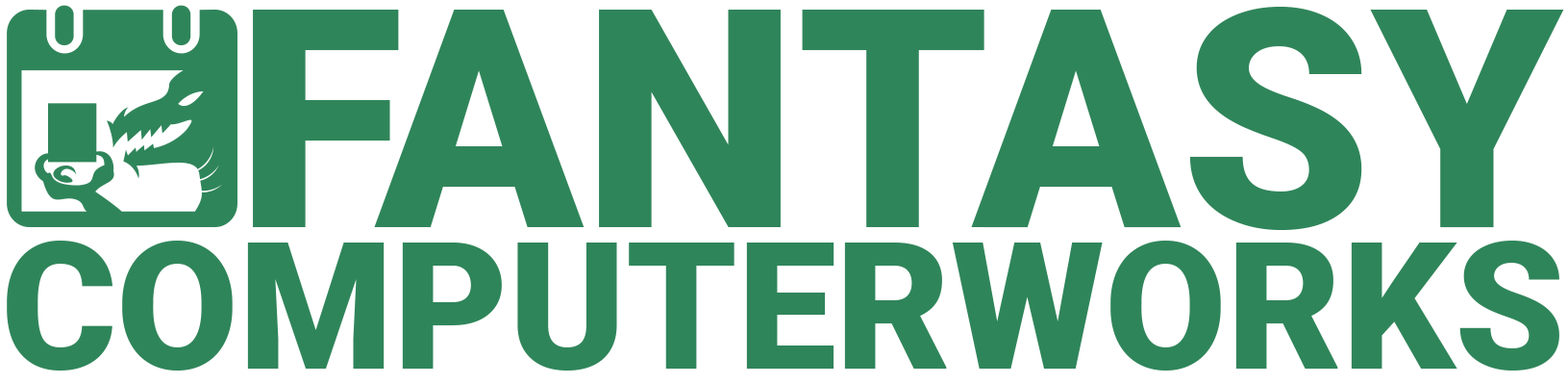
<style>
.page{position:relative;width:1568px;height:384px;background:#ffffff}
.page>*{position:absolute;margin:0}
.t1{font:305.6px "Roboto-Black";color:#2f855a}
.t2{font:176.7px "Roboto-Black";color:#2f855a}
</style>
<div class="page">
<p class="t1" style="left:253px;top:7px;width:1311px;height:223px">FANTASY</p>
<p class="t2" style="left:7px;top:240px;width:1552px;height:130px">COMPUTERWORKS</p>
</div>
